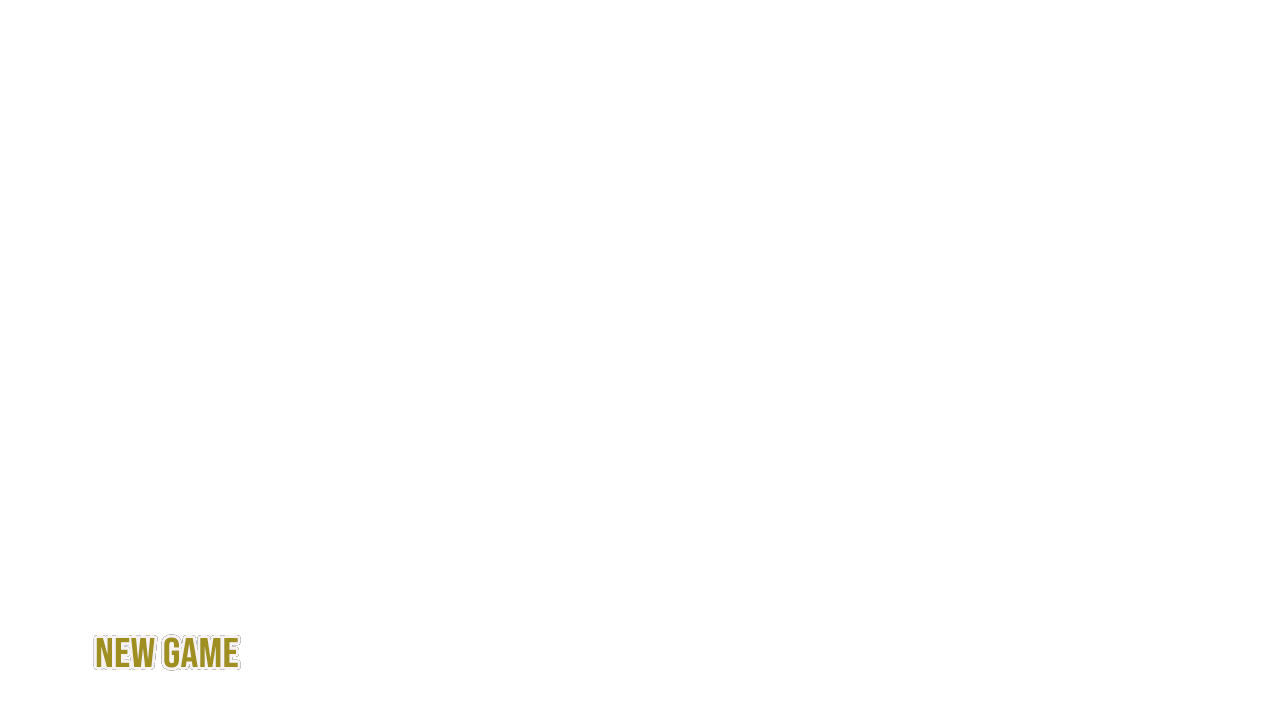
<style>
.page{position:relative;width:1280px;height:720px;background:#ffffff}
.page>*{position:absolute;margin:0}
.t1{font:41.4px "BebasNeue-Regular";letter-spacing:0.01em;color:#9f8f20;scale:1.06 1}
</style>
<div class="page">
<p class="t1" style="left:96px;top:637px;width:142px;height:31px">New Game</p>
<p class="t1" style="left:96px;top:637px;width:142px;height:31px">New Game</p>
</div>
